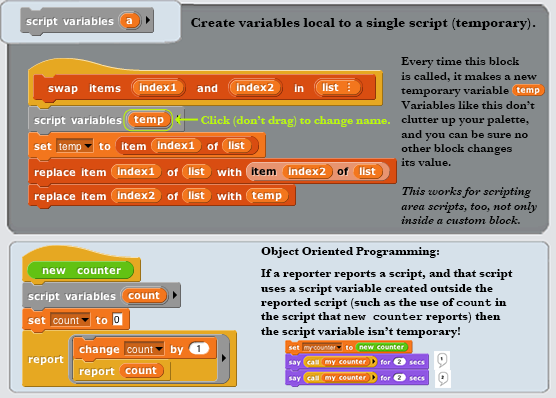
<style>
.page{position:relative;width:556px;height:398px;background:#858a8c}
.page>*{position:absolute;margin:0}
.t1{font:14px "Baskerville-Bold";color:#000000}
.t2{font:12px "Baskerville-SemiBold";color:#000000}
.t3{font:12px "Baskerville-SemiBoldItalic";color:#000000}
.t4{font:12px "Baskerville-SemiBold";color:#bdfb00}
.t5{font:12px "Baskerville-Bold";color:#000000}
.t6{font:12px "CourierCE-Bold";color:#000000}
</style>
<div class="page">
<p class="t1" style="left:191px;top:18px;width:345px;height:12px">Create variables local to a single script (temporary).</p>
<p class="t2" style="left:401px;top:57px;width:136px;height:167px">Every time this block<br>is called, it makes a new<br>temporary variable<br>Variables like this don’t<br>clutter up your palette,<br>and you can be sure no<br>other block changes<br>its value.<br><br><span class="t3">This works for scripting<br>area scripts, too, not only<br>inside a custom block.</span></p>
<p class="t4" style="left:201px;top:116px;width:189px;height:11px">Click (don’t drag) to change name.</p>
<p class="t5" style="left:261px;top:247px;width:252px;height:91px">Object Oriented Programming:<br> <br>If a reporter reports a script, and that script<br>uses a script variable created outside the<br>reported script (such as the use of <span class="t6">count</span> in<br>the script that <span class="t6">new counter</span> reports) then<br>the script variable isn’t temporary!</p>
</div>
